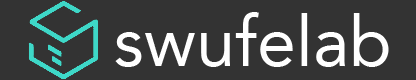
<style>
.page{position:relative;width:416px;height:80px;background:#333333}
.page>*{position:absolute;margin:0}
.t1{font:70px "Avenir-Roman";color:#ffffff}
</style>
<div class="page">
<p class="t1" style="left:115px;top:12px;width:274px;height:55px">swufelab</p>
</div>
